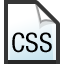
<style>
.page{position:relative;width:64px;height:64px;background:#ffffff}
.page>*{position:absolute;margin:0}
.t1{font:27px "HelveticaNeue-Condensed";color:#000000}
</style>
<div class="page">
<p class="t1" style="left:12px;top:32px;width:40px;height:21px">CSS</p>
</div>
